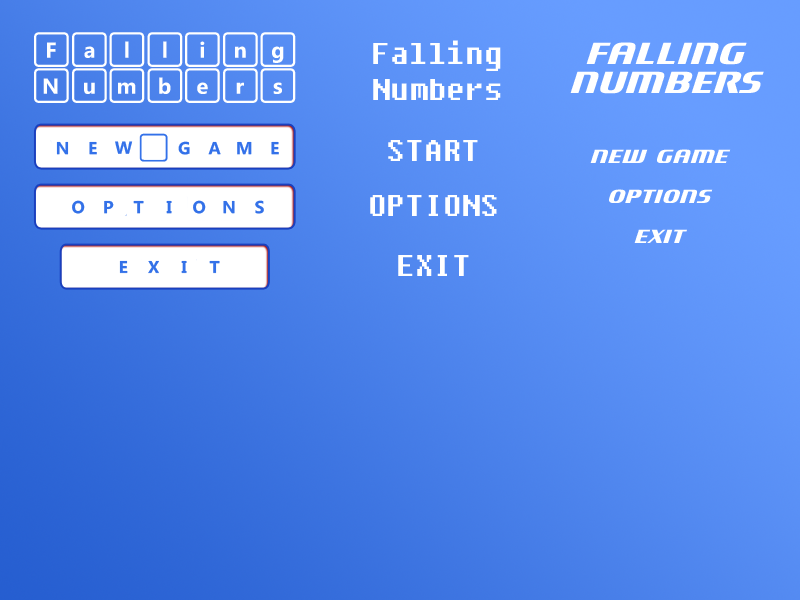
<style>
.page{position:relative;width:800px;height:600px}
.page>*{position:absolute;margin:0}
.t1{font:30px "SegoeKeycaps";color:#ffffff}
.t2{font:30px "Fixedsys";color:#ffffff}
.t3{font:48px/28.8px "Motorwerk";color:#ffffff}
.t4{font:30px "Motorwerk";color:#ffffff}
</style>
<div class="page">
<p class="t1" style="left:34px;top:32px;width:262px;height:71px;text-align:center">Falling<br>Numbers</p>
<p class="t2" style="left:373px;top:40px;width:128px;height:60px;text-align:center">Falling<br>Numbers</p>
<p class="t3" style="left:570px;top:42px;width:194px;height:52px;text-align:center">Falling<br>Numbers</p>
<p class="t2" style="left:388px;top:140px;width:90px;height:21px">START</p>
<p class="t4" style="left:590px;top:149px;width:141px;height:14px">NEW GAME</p>
<p class="t2" style="left:370px;top:195px;width:127px;height:21px">OPTIONS</p>
<p class="t4" style="left:609px;top:189px;width:104px;height:14px">OPTIONS</p>
<p class="t4" style="left:634px;top:229px;width:53px;height:14px">EXIT</p>
<p class="t2" style="left:398px;top:255px;width:71px;height:21px">EXIT</p>
</div>
